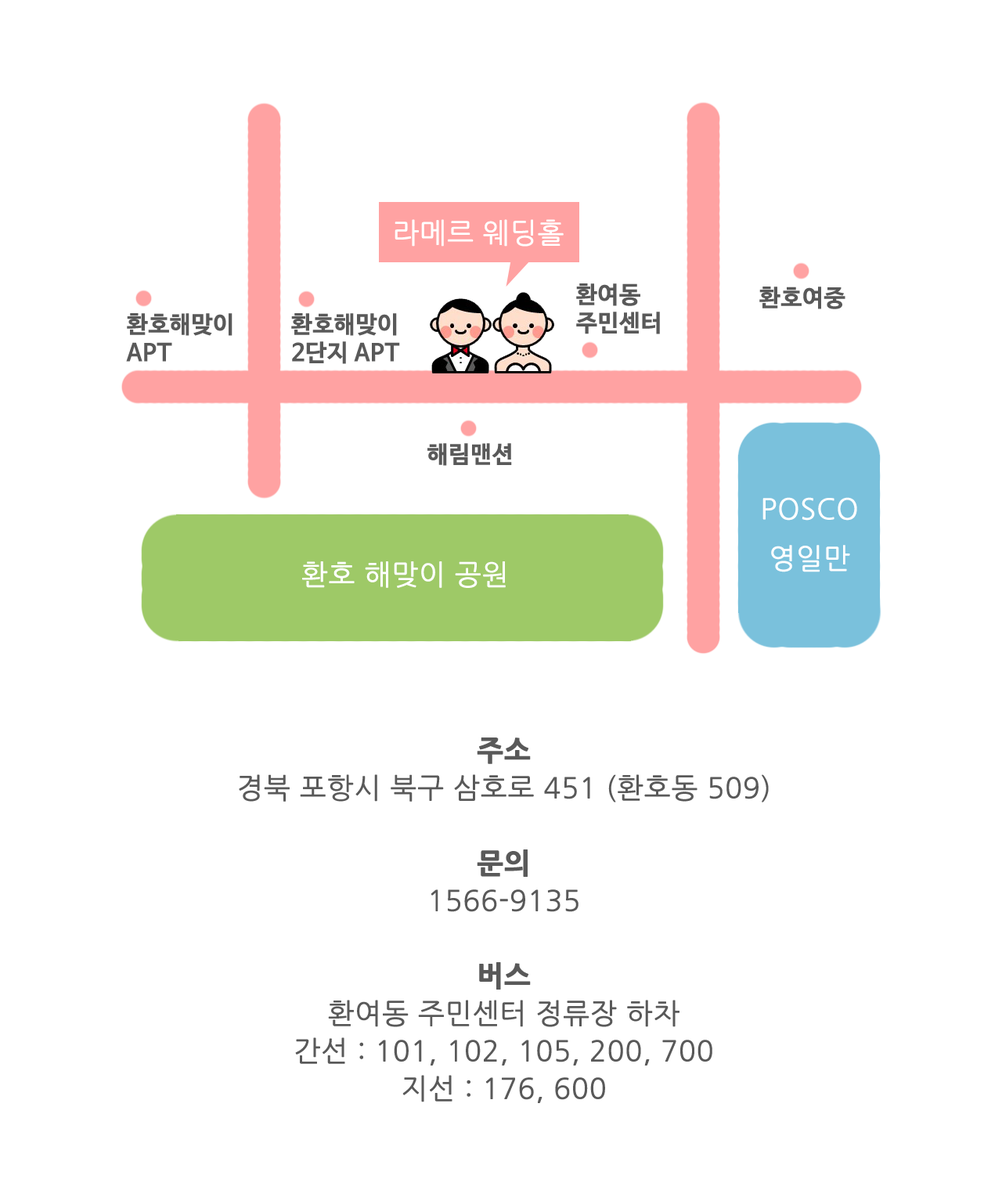
<style>
.page{position:relative;width:1002px;height:1190px;background:#ffffff}
.page>*{position:absolute;margin:0}
.t1{font:28.2px "NanumGothic";color:#ffffff;font-weight:bold}
.t2{font:23.5px/28.2px "NanumBarunGothicBold";color:#595959;font-weight:bold}
.t3{font:23.5px "NanumBarunGothicBold";color:#595959;font-weight:bold}
.t4{font:28.2px/37.6px "NanumGothic";color:#595959;font-weight:bold}
.t5{font:28.2px/37.6px "NanumGothicExtraBold";color:#595959;font-weight:bold}
</style>
<div class="page">
<p class="t1" style="left:395px;top:219px;width:169px;height:28px">라메르 웨딩홀</p>
<p class="t2" style="left:576px;top:283px;width:84px;height:51px">환여동<br>주민센터</p>
<p class="t3" style="left:759px;top:287px;width:87px;height:22px">환호여중</p>
<p class="t2" style="left:126px;top:313px;width:107px;height:49px">환호해맞이<br>APT</p>
<p class="t2" style="left:291px;top:313px;width:109px;height:51px">환호해맞이<br>2단지 APT</p>
<p class="t3" style="left:427px;top:443px;width:85px;height:23px">해림맨션</p>
<p class="t1" style="left:763px;top:497px;width:94px;height:75px;text-align:center">POSCO<br>영일만</p>
<p class="t1" style="left:302px;top:561px;width:204px;height:27px">환호 해맞이 공원</p>
<p class="t4" style="left:239px;top:737px;width:530px;height:366px;text-align:center"><span class="t5">주소<br></span>경북 포항시 북구 삼호로 451 (환호동 509)<br><br><span class="t5">문의<br></span>1566-9135<br><br><span class="t5">버스<br></span>환여동 주민센터 정류장 하차<br>간선 : 101, 102, 105, 200, 700<br>지선 : 176, 600</p>
</div>
